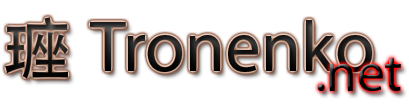
<style>
.page{position:relative;width:409px;height:107px;background:#ffffff}
.page>*{position:absolute;margin:0}
.t1{font:72px "MyriadPro-Regular";color:#181717}
.t2{font:55px "MyriadPro-Regular";color:#000000}
</style>
<div class="page">
<p class="t1" style="left:90px;top:20px;width:282px;height:52px">Tronenko</p>
<p class="t2" style="left:318px;top:57px;width:83px;height:34px">.net</p>
</div>
